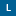
<style>
.page{position:relative;width:16px;height:16px;background:#006094}
.page>*{position:absolute;margin:0}
.t1{font:10px "MyriadPro-Regular";color:#ffffff}
</style>
<div class="page">
<p class="t1" style="left:6px;top:4px;width:5px;height:7px">L</p>
</div>
